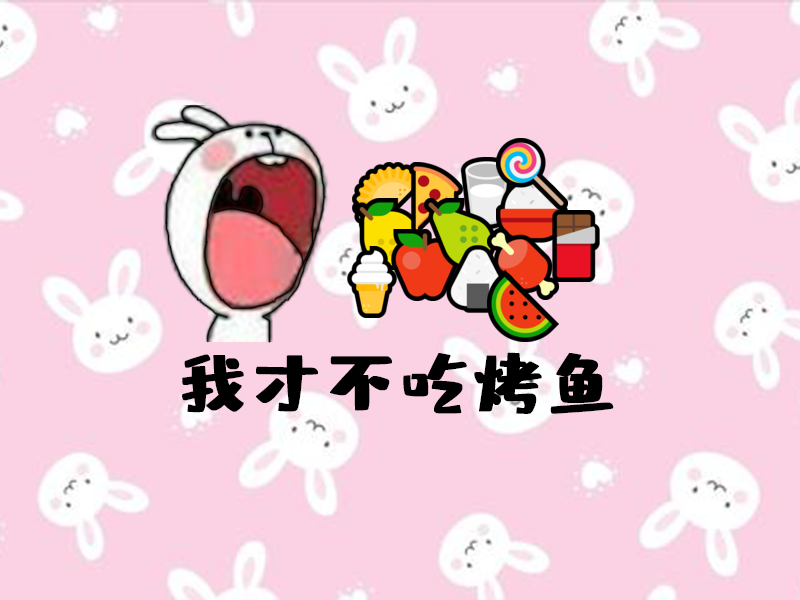
<style>
.page{position:relative;width:800px;height:600px;background:#fbd2e4}
.page>*{position:absolute;margin:0}
.t1{font:72px "27--Regular";color:#000000;font-weight:bold}
</style>
<div class="page">
<p class="t1" style="left:182px;top:352px;width:432px;height:62px">我才不吃烤鱼</p>
</div>
